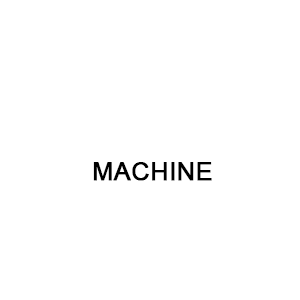
<style>
.page{position:relative;width:300px;height:300px;background:#ffffff}
.page>*{position:absolute;margin:0}
.t1{font:25.4px "ArialMT";color:#000000;font-weight:bold}
</style>
<div class="page">
<p class="t1" style="left:93px;top:162px;width:119px;height:19px">MACHINE</p>
</div>
